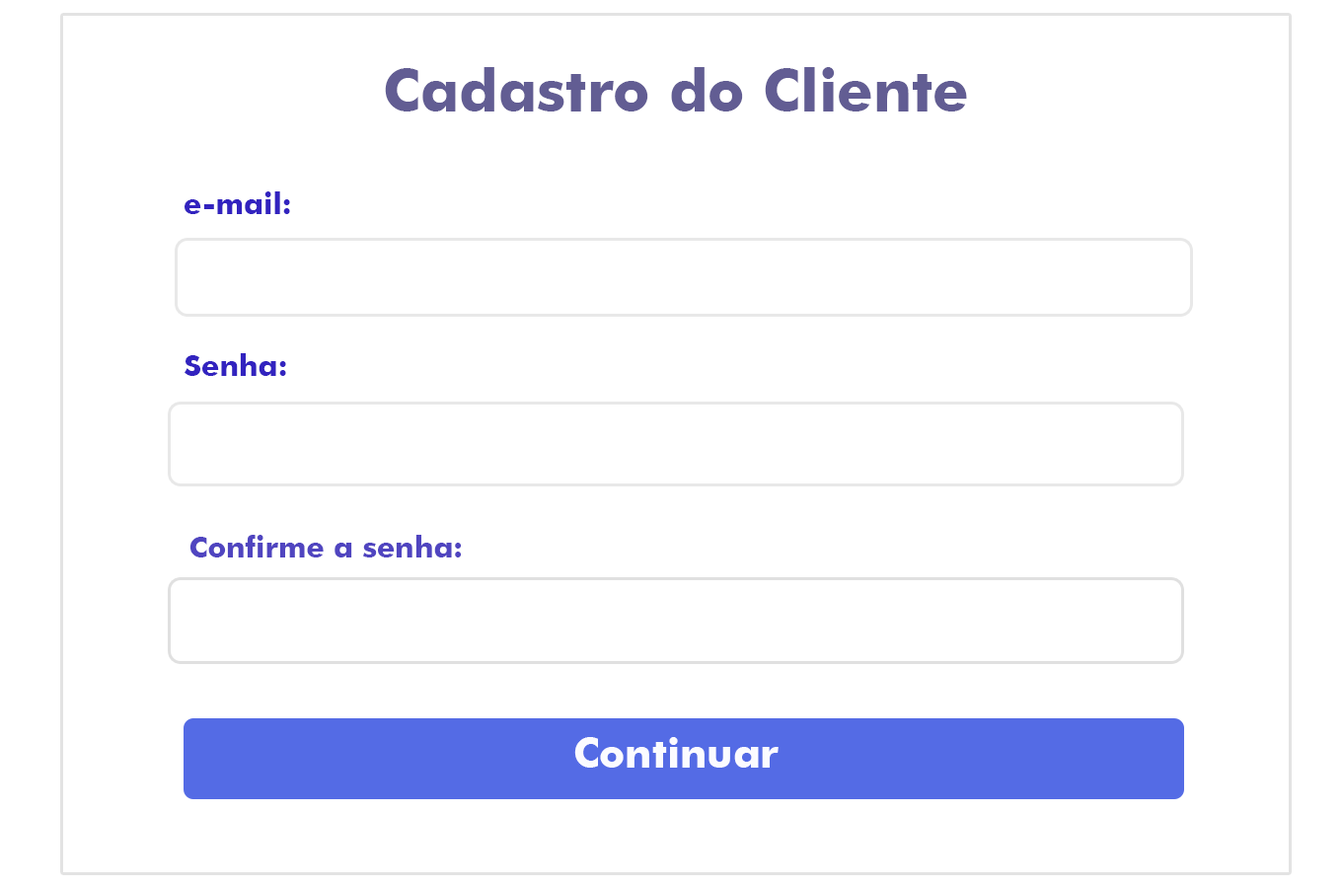
<style>
.page{position:relative;width:1342px;height:888px;background:#ffffff}
.page>*{position:absolute;margin:0}
.t1{font:59.2px "FuturaBT-Bold";color:#625d93}
.t2{font:29.6px "FuturaBT-Bold";color:#3223bf}
.t3{font:29.6px "FuturaBT-Bold";color:#5045c0}
.t4{font:41.5px "FuturaBT-Bold";color:#fbfbff}
</style>
<div class="page">
<p class="t1" style="left:385px;top:67px;width:582px;height:45px">Cadastro do Cliente</p>
<p class="t2" style="left:185px;top:191px;width:105px;height:23px">e-mail:</p>
<p class="t2" style="left:185px;top:353px;width:101px;height:23px">Senha:</p>
<p class="t3" style="left:190px;top:535px;width:272px;height:23px">Confirme a senha:</p>
<p class="t4" style="left:574px;top:737px;width:205px;height:31px">Continuar</p>
</div>
